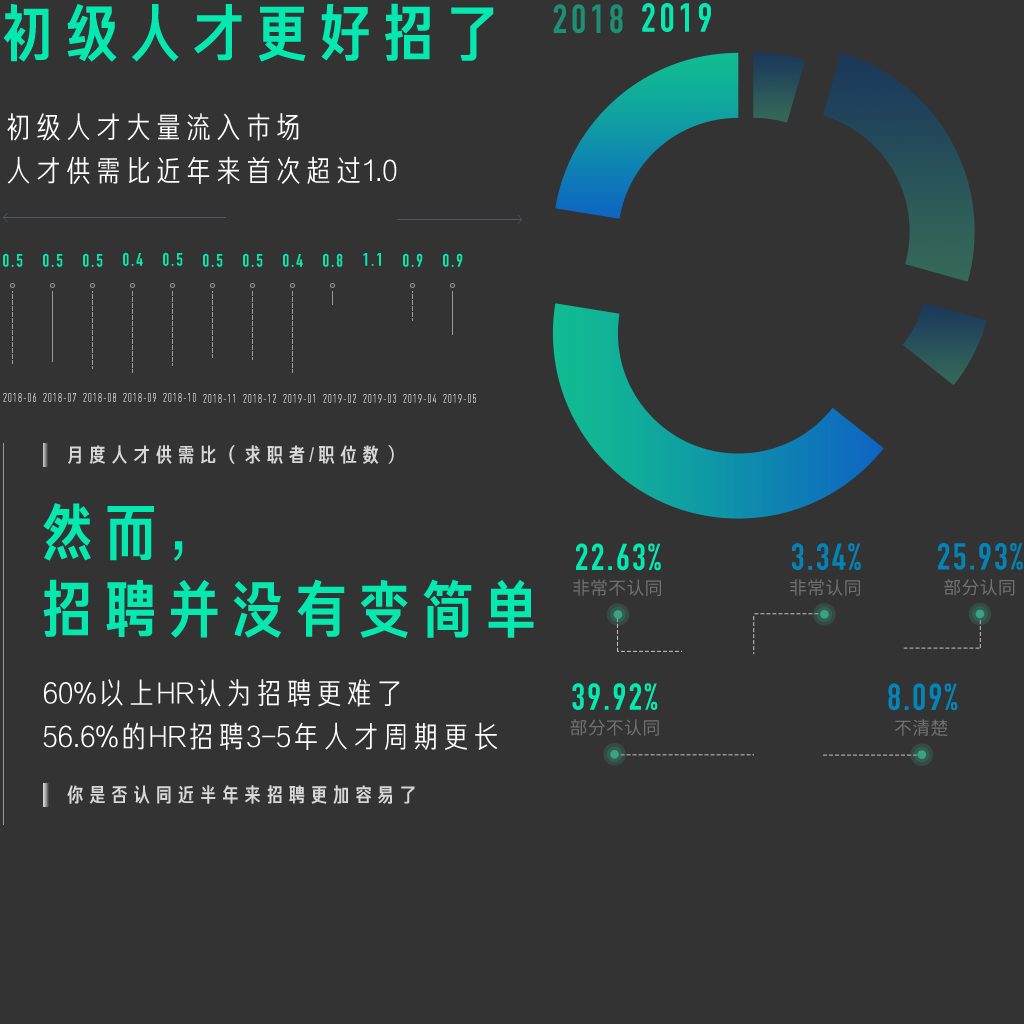
<style>
.page{position:relative;width:1024px;height:1024px;background:#333333}
.page>*{position:absolute;margin:0}
.t1{font:63.4px "FZCJHJW--GB1-0";color:#05e9b1}
.t2{font:40px "DINCondensed-Bold";letter-spacing:0.1em;color:#1d8f73}
.t3{font:40px "DINCondensed-Bold";letter-spacing:0.1em;color:#05e9b1}
.t4{font:30px/43.5px "FZJHJW--GB1-0";color:#ffffff}
.t5{font:18px "DINCondensed-Bold";letter-spacing:0.1em;color:#05e9b1}
.t6{font:12px "DINCond-Regular";letter-spacing:0.06em}
.t7{font:20.2px "FZCJHJW--GB1-0";letter-spacing:0.1em;color:#d7d7d7}
.t8{font:63.4px/76.7px "FZCJHJW--GB1-0";color:#05e9b1}
.t9{font:37.1px "DINCondensed-Bold";letter-spacing:0.06em;color:#05e9b1}
.t10{font:37.1px "DINCondensed-Bold";letter-spacing:0.06em;color:#0483b7}
.t11{font:18px "SourceHanSansCN-Regular";letter-spacing:0.01em;color:#717171}
.t12{font:37.1px "DINCondensed-Bold";letter-spacing:0.06em;color:#0385bb}
</style>
<div class="page">
<p class="t1" style="left:3px;top:3px;width:491px;height:59px">初级人才更好招了</p>
<p class="t2" style="left:553px;top:4px;width:70px;height:30px">2018</p>
<p class="t3" style="left:642px;top:3px;width:69px;height:29px">2019</p>
<p class="t4" style="left:7px;top:113px;width:390px;height:71px">初级人才大量流入市场<br>人才供需比近年来首次超过1.0</p>
<p class="t5" style="left:3px;top:253px;width:20px;height:14px">0.5</p>
<p class="t5" style="left:43px;top:253px;width:20px;height:14px">0.5</p>
<p class="t5" style="left:83px;top:253px;width:20px;height:14px">0.5</p>
<p class="t5" style="left:123px;top:252px;width:20px;height:14px">0.4</p>
<p class="t5" style="left:163px;top:252px;width:20px;height:14px">0.5</p>
<p class="t5" style="left:203px;top:253px;width:20px;height:14px">0.5</p>
<p class="t5" style="left:243px;top:253px;width:20px;height:14px">0.5</p>
<p class="t5" style="left:283px;top:253px;width:20px;height:14px">0.4</p>
<p class="t5" style="left:323px;top:253px;width:20px;height:14px">0.8</p>
<p class="t5" style="left:363px;top:253px;width:18px;height:13px">1.1</p>
<p class="t5" style="left:403px;top:253px;width:20px;height:14px">0.9</p>
<p class="t5" style="left:443px;top:253px;width:20px;height:14px">0.9</p>
<p class="t6" style="left:3px;top:393px;width:33px;height:9px">2018-06</p>
<p class="t6" style="left:43px;top:393px;width:33px;height:9px">2018-07</p>
<p class="t6" style="left:83px;top:393px;width:33px;height:9px">2018-08</p>
<p class="t6" style="left:123px;top:393px;width:33px;height:9px">2018-09</p>
<p class="t6" style="left:163px;top:393px;width:33px;height:9px">2018-10</p>
<p class="t6" style="left:203px;top:394px;width:32px;height:9px">2018-11</p>
<p class="t6" style="left:243px;top:394px;width:33px;height:9px">2018-12</p>
<p class="t6" style="left:283px;top:394px;width:32px;height:9px">2019-01</p>
<p class="t6" style="left:323px;top:394px;width:33px;height:9px">2019-02</p>
<p class="t6" style="left:363px;top:394px;width:33px;height:9px">2019-03</p>
<p class="t6" style="left:403px;top:394px;width:33px;height:9px">2019-04</p>
<p class="t6" style="left:443px;top:394px;width:33px;height:9px">2019-05</p>
<p class="t7" style="left:68px;top:445px;width:326px;height:19px">月度人才供需比（求职者/职位数）</p>
<p class="t8" style="left:43px;top:503px;width:491px;height:135px">然而，<br>招聘并没有变简单</p>
<p class="t9" style="left:576px;top:543px;width:85px;height:28px">22.63%</p>
<p class="t10" style="left:792px;top:543px;width:69px;height:27px">3.34%</p>
<p class="t10" style="left:938px;top:543px;width:85px;height:27px">25.93%</p>
<p class="t11" style="left:573px;top:579px;width:88px;height:17px">非常不认同</p>
<p class="t11" style="left:790px;top:579px;width:70px;height:17px">非常认同</p>
<p class="t11" style="left:944px;top:578px;width:71px;height:18px">部分认同</p>
<p class="t4" style="left:43px;top:679px;width:455px;height:71px">60%以上HR认为招聘更难了<br>56.6%的HR招聘3-5年人才周期更长</p>
<p class="t9" style="left:572px;top:683px;width:86px;height:27px">39.92%</p>
<p class="t12" style="left:888px;top:683px;width:70px;height:28px">8.09%</p>
<p class="t11" style="left:570px;top:719px;width:89px;height:17px">部分不认同</p>
<p class="t11" style="left:894px;top:719px;width:54px;height:17px">不清楚</p>
<p class="t7" style="left:67px;top:785px;width:348px;height:19px">你是否认同近半年来招聘更加容易了</p>
</div>
